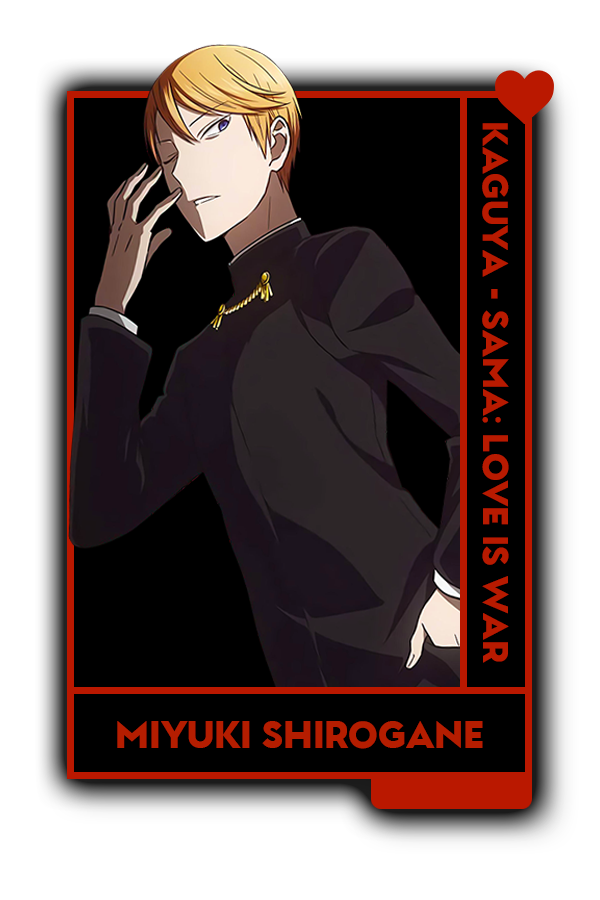
<style>
.page{position:relative;width:600px;height:900px;background:#000000}
.page>*{position:absolute;margin:0}
.t1{font:34px "GarnetCapitalsBlack-Regular";color:#b52616}
.t2{font:35.7px "GarnetCapitalsBlack-Regular";color:#b22818}
</style>
<div class="page">
<p class="t1" style="left:482px;top:123px;width:27px;height:540px;rotate:90deg">Kaguya - Sama: Love is war</p>
<p class="t2" style="left:117px;top:721px;width:366px;height:28px">MIYUKI SHIROGANE</p>
</div>
